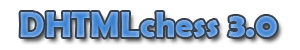
<style>
.page{position:relative;width:300px;height:50px;background:#ffffff}
.page>*{position:absolute;margin:0}
.t1{font:36px "BerlinSansFBDemi-Bold"}
</style>
<div class="page">
<p class="t1" style="left:20px;top:12px;width:257px;height:26px">DHTMLchess 3.0</p>
</div>
